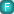
<style>
.page{position:relative;width:14px;height:14px}
.page>*{position:absolute;margin:0}
.t1{font:11px "ArialMT";letter-spacing:-0.05em;color:#ffffff}
</style>
<div class="page">
<p class="t1" style="left:5px;top:3px;width:5px;height:8px">F</p>
</div>
